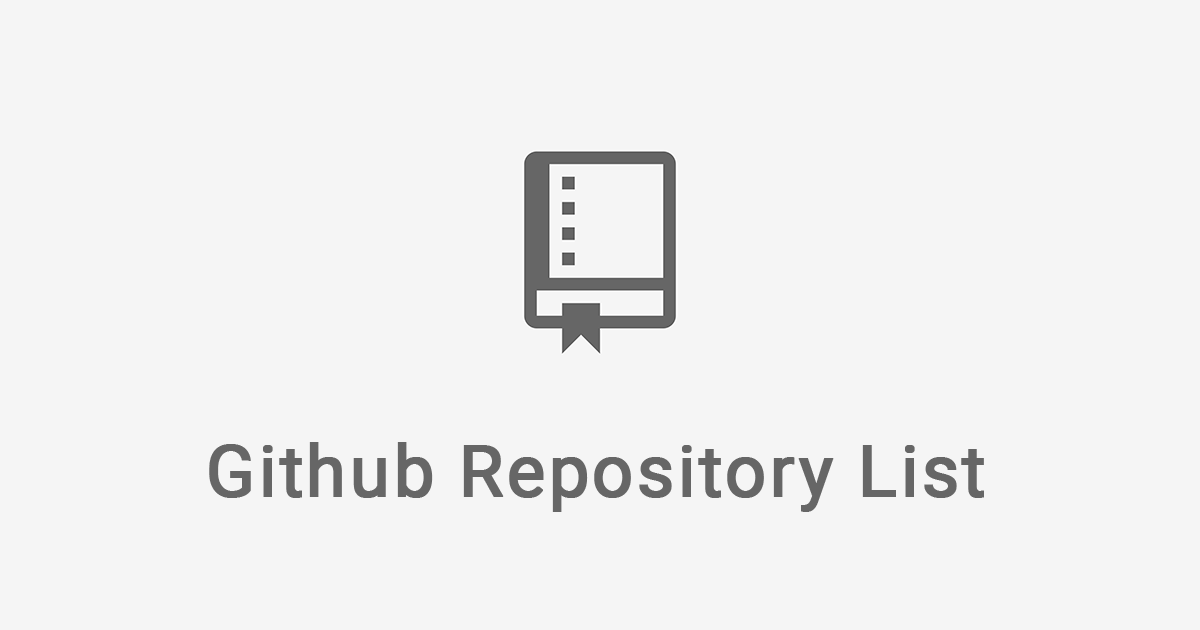
<style>
.page{position:relative;width:1200px;height:630px;background:#f5f5f5}
.page>*{position:absolute;margin:0}
.t1{font:72px "Roboto-Regular";letter-spacing:0.024em;color:#666666;font-weight:bold}
</style>
<div class="page">
<p class="t1" style="left:209px;top:442px;width:775px;height:70px">Github Repository List</p>
</div>
